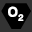
<style>
.page{position:relative;width:32px;height:32px;background:#333333}
.page>*{position:absolute;margin:0}
.t1{font:18px "ArialMT";color:#ffffff;font-weight:bold}
.t2{font:18px "Helvetica";color:#ffffff;font-weight:bold}
</style>
<div class="page">
<p class="t1" style="left:8px;top:6px;width:16px;height:15px">o<span class="t2">₂</span></p>
</div>
